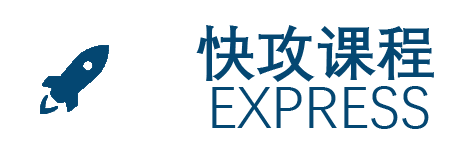
<style>
.page{position:relative;width:450px;height:150px;background:#ffffff}
.page>*{position:absolute;margin:0}
.t1{font:60px "DengXian-Bold";color:#044772}
</style>
<div class="page">
<p class="t1" style="left:196px;top:25px;width:238px;height:57px">快攻课程</p>
</div>
